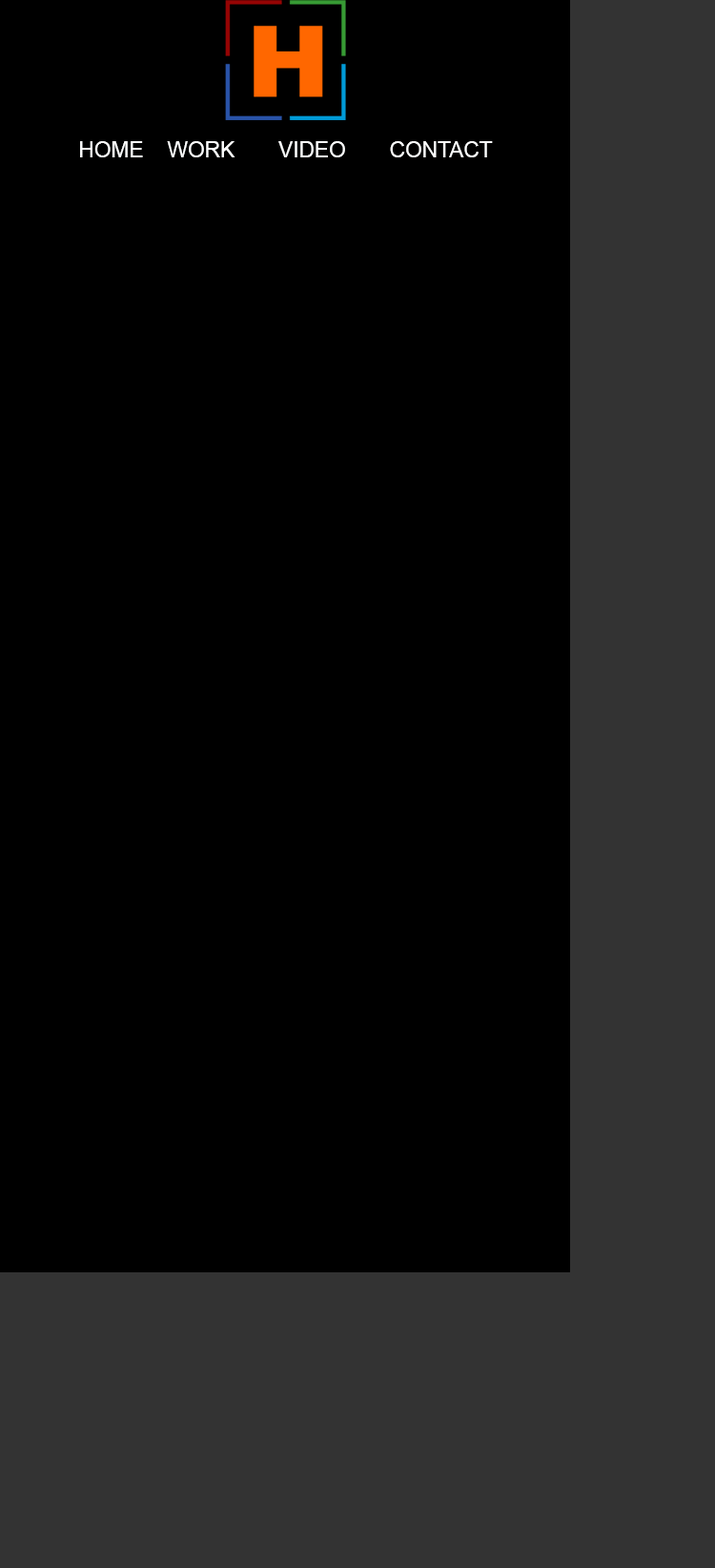
<style>
.page{position:relative;width:715px;height:1568px;background:#000000}
.page>*{position:absolute;margin:0}
.t1{font:21.6px "ArialMT";color:#feffff}
</style>
<div class="page">
<p class="t1" style="left:80px;top:141px;width:413px;height:16px">HOME  WORK  VIDEO  CONTACT</p>
</div>
